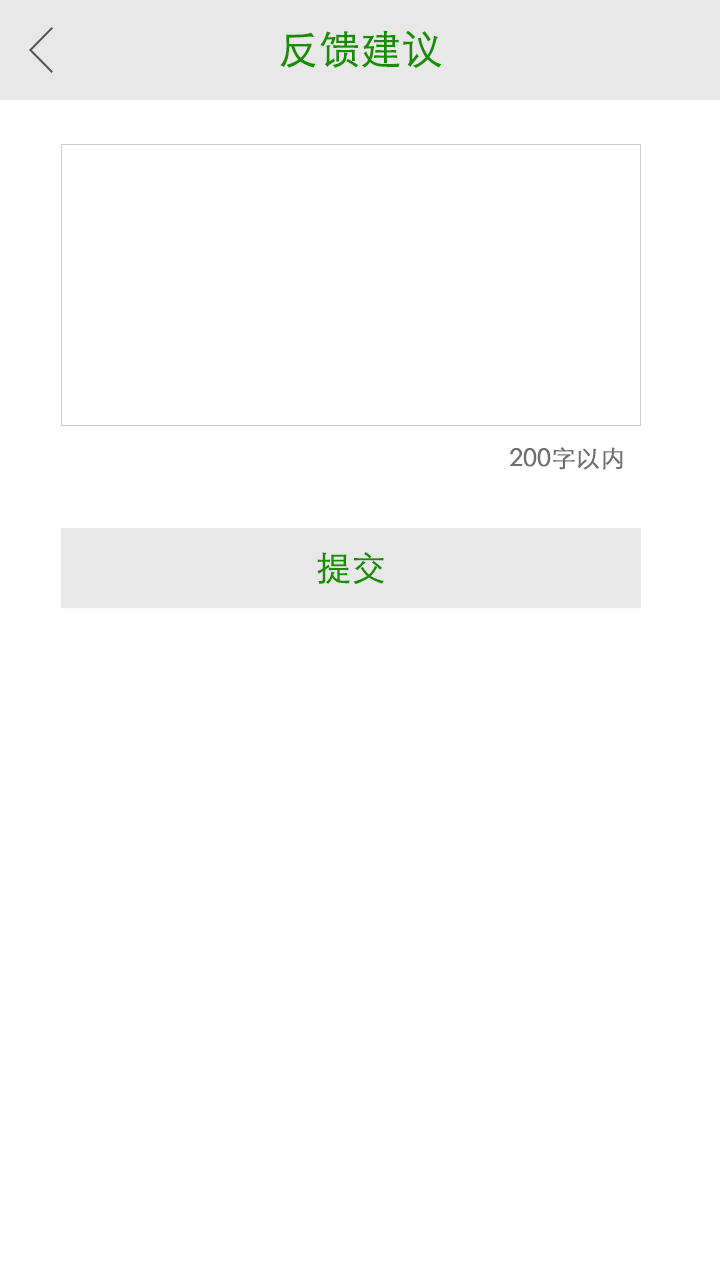
<style>
.page{position:relative;width:720px;height:1280px;background:#ffffff}
.page>*{position:absolute;margin:0}
.t1{font:40px "STXihei";color:#178d00;font-weight:bold}
.t2{font:24px "STXihei";color:#6e6e6e;font-weight:bold}
.t3{font:34px "STXihei";color:#178d00;font-weight:bold}
</style>
<div class="page">
<p class="t1" style="left:280px;top:30px;width:162px;height:38px">反馈建议</p>
<p class="t2" style="left:509px;top:447px;width:114px;height:23px">200字以内</p>
<p class="t3" style="left:317px;top:552px;width:67px;height:33px">提交</p>
</div>
